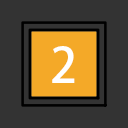
<style>
.page{position:relative;width:128px;height:128px;background:#333333}
.page>*{position:absolute;margin:0}
.t1{font:48px "AdobeHeitiStd-Regular";color:#ffffff}
</style>
<div class="page">
<p class="t1" style="left:52px;top:46px;width:23px;height:37px">2</p>
</div>
